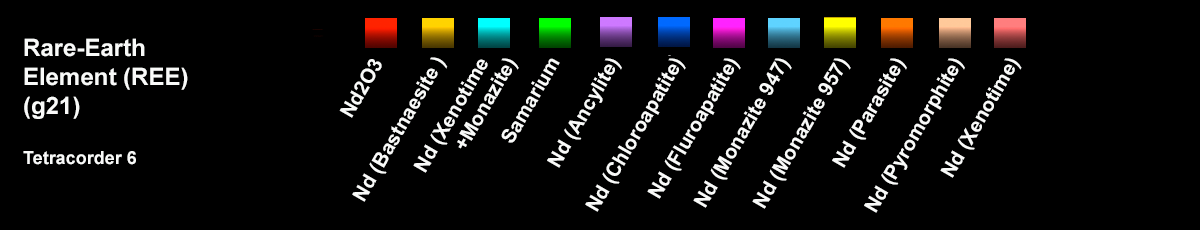
<style>
.page{position:relative;width:1200px;height:230px;background:#000000}
.page>*{position:absolute;margin:0}
.t1{font:24px "Arial-BoldMT";color:#f9faf9}
.t2{font:18px "Arial-BoldMT";color:#f9faf9}
.t3{font:20px "Arial-BoldMT";color:#f9faf9}
</style>
<div class="page">
<p class="t1" style="left:23px;top:38px;width:165px;height:127px">Rare-Earth<br>Element (REE)<br>(g21)<br><br><span class="t2">Tetracorder 6</span></p>
<p class="t3" style="left:339px;top:59px;width:43px;height:59px;rotate:-60deg">Nd2O3</p>
<p class="t3" style="left:352px;top:57px;width:96px;height:145px;rotate:-60deg">Nd (Bastnaesite )</p>
<p class="t3" style="left:413px;top:58px;width:106px;height:115px;rotate:-60deg">Nd (Xenotime<br>       +Monazite)</p>
<p class="t3" style="left:501px;top:58px;width:59px;height:85px;rotate:-60deg">Samarium</p>
<p class="t3" style="left:547px;top:58px;width:75px;height:110px;rotate:-60deg">Nd (Ancylite)</p>
<p class="t3" style="left:585px;top:58px;width:101px;height:154px;rotate:-60deg">Nd (Chloroapatite)</p>
<p class="t3" style="left:647px;top:58px;width:94px;height:141px;rotate:-60deg">Nd (Fluroapatite)</p>
<p class="t3" style="left:693px;top:58px;width:99px;height:150px;rotate:-60deg">Nd (Monazite 947)</p>
<p class="t3" style="left:752px;top:58px;width:99px;height:151px;rotate:-60deg"><span class="t1">  </span>Nd (Monazite 957)</p>
<p class="t3" style="left:832px;top:58px;width:75px;height:110px;rotate:-60deg"><span class="t2"> </span>Nd (Parasite)</p>
<p class="t3" style="left:864px;top:58px;width:101px;height:155px;rotate:-60deg"><span class="t2"> </span>Nd (Pyromorphite)</p>
<p class="t3" style="left:940px;top:58px;width:82px;height:120px;rotate:-60deg">Nd (Xenotime)</p>
</div>
